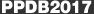
<style>
.page{position:relative;width:94px;height:14px;background:#333333}
.page>*{position:absolute;margin:0}
.t1{font:17.3px "Swiss721BT-Black";color:#ffffff;scale:0.93 1}
</style>
<div class="page">
<p class="t1" style="left:2px;top:0px;width:90px;height:14px">PPDB2017</p>
</div>
